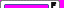
<style>
.page{position:relative;width:64px;height:8px;background:#ffffff}
.page>*{position:absolute;margin:0}
.t1{font:7.7px "Arial-Black";letter-spacing:-0.01em;color:#101010;scale:1.18 1}
</style>
<div class="page">
<p class="t1" style="left:51px;top:2px;width:6px;height:6px">F</p>
</div>
